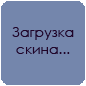
<style>
.page{position:relative;width:86px;height:86px;background:#7486ac}
.page>*{position:absolute;margin:0}
.t1{font:14px "CenturyGothic";color:#200428}
</style>
<div class="page">
<p class="t1" style="left:12px;top:27px;width:62px;height:27px;text-align:center">Загрузка<br>скина...</p>
</div>
